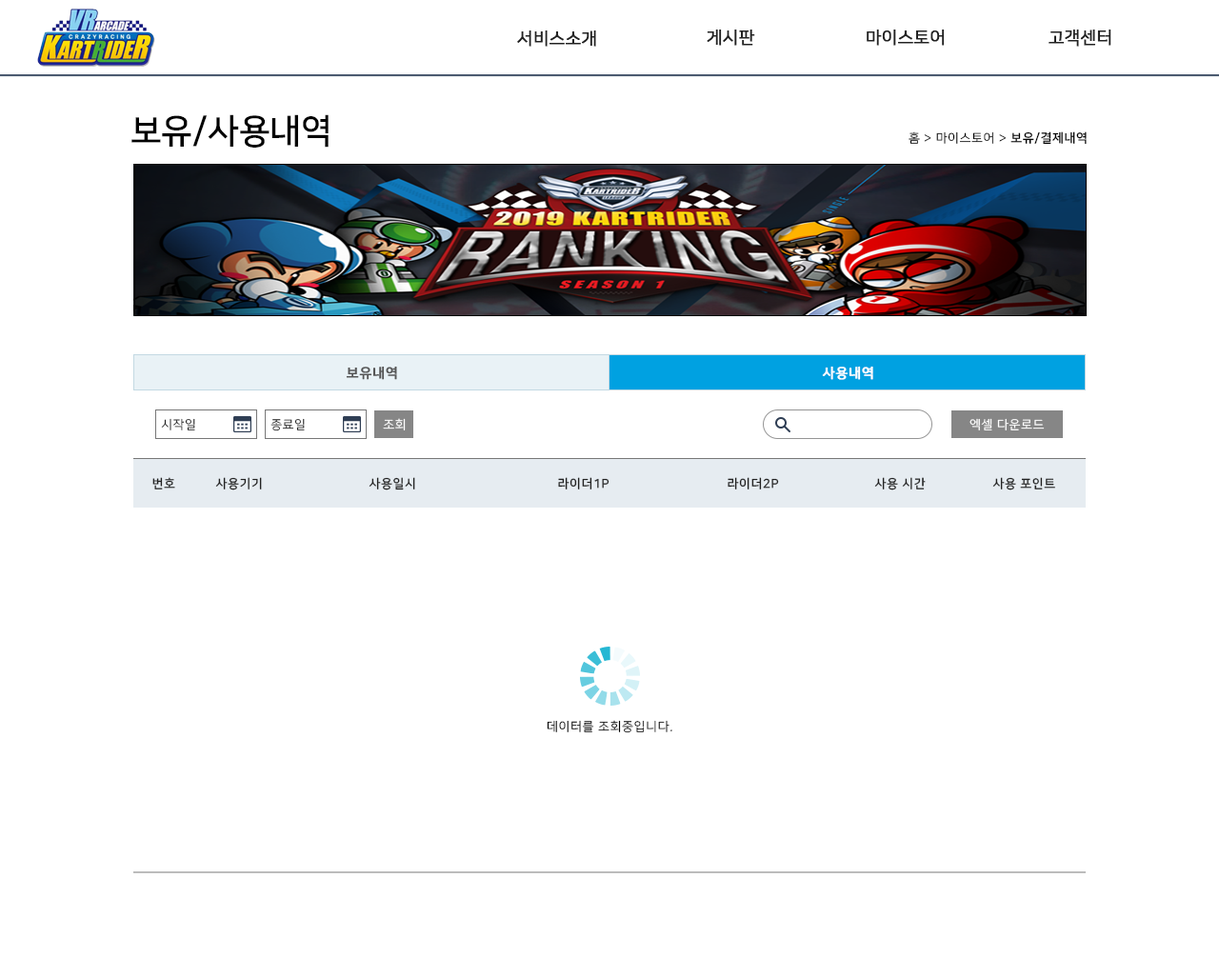
<style>
.page{position:relative;width:1219px;height:978px;background:#ffffff}
.page>*{position:absolute;margin:0}
.t1{font:17.1px "NanumSquareR";color:#222222;font-weight:bold}
.t2{font:34.3px "NanumSquareB";color:#000000}
.t3{font:12.4px "NanumSquareR";letter-spacing:0.05em;color:#000000}
.t4{font:12.4px "NanumSquareB";letter-spacing:0.05em;color:#000000}
.t5{font:13.3px "NanumSquareB";letter-spacing:0.05em;color:#555555;font-weight:bold}
.t6{font:13.3px "NanumSquareB";letter-spacing:0.05em;color:#ffffff;font-weight:bold}
.t7{font:12.4px "NanumSquareR";letter-spacing:0.05em;color:#222222}
.t8{font:12.4px "NanumSquareR";letter-spacing:0.05em;color:#ffffff}
.t9{font:12.4px "NanumSquareB";letter-spacing:0.05em;color:#222222}
</style>
<div class="page">
<p class="t1" style="left:517px;top:30px;width:79px;height:17px">서비스소개</p>
<p class="t1" style="left:707px;top:29px;width:48px;height:17px">게시판</p>
<p class="t1" style="left:867px;top:29px;width:78px;height:17px">마이스토어</p>
<p class="t1" style="left:1049px;top:29px;width:62px;height:17px">고객센터</p>
<p class="t2" style="left:131px;top:114px;width:198px;height:34px">보유/사용내역</p>
<p class="t3" style="left:909px;top:131px;width:178px;height:14px">홈 &gt; 마이스토어 &gt; <span class="t4">보유/결제내역</span></p>
<p class="t5" style="left:346px;top:366px;width:51px;height:14px">보유내역</p>
<p class="t6" style="left:822px;top:366px;width:51px;height:14px">사용내역</p>
<p class="t7" style="left:161px;top:418px;width:34px;height:12px">시작일</p>
<p class="t7" style="left:270px;top:418px;width:35px;height:13px">종료일</p>
<p class="t8" style="left:383px;top:418px;width:23px;height:12px">조회</p>
<p class="t8" style="left:970px;top:418px;width:75px;height:12px">엑셀 다운로드</p>
<p class="t9" style="left:152px;top:477px;width:23px;height:13px">번호</p>
<p class="t9" style="left:215px;top:477px;width:47px;height:13px">사용기기</p>
<p class="t9" style="left:369px;top:477px;width:46px;height:13px">사용일시</p>
<p class="t9" style="left:558px;top:477px;width:52px;height:13px">라이더1P</p>
<p class="t9" style="left:728px;top:477px;width:51px;height:13px">라이더2P</p>
<p class="t9" style="left:874px;top:477px;width:52px;height:13px">사용 시간</p>
<p class="t9" style="left:992px;top:477px;width:63px;height:13px">사용 포인트</p>
<p class="t3" style="left:547px;top:720px;width:125px;height:13px">데이터를 조회중입니다.</p>
</div>
